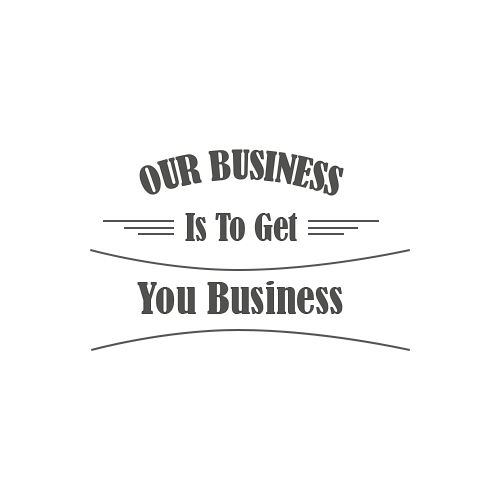
<style>
.page{position:relative;width:500px;height:500px;background:#ffffff}
.page>*{position:absolute;margin:0}
.t1{font:36.5px "BernardMT-Condensed";color:#51514f}
.t2{font:34.5px "BernardMT-Condensed";color:#51514f}
.t3{font:40px "BernardMT-Condensed";color:#51514f;scale:1.06 1}
</style>
<div class="page">
<p class="t1" style="left:139px;top:149px;width:205px;height:47px">OUR BUSINESS</p>
<p class="t2" style="left:185px;top:213px;width:112px;height:28px">Is To Get</p>
<p class="t3" style="left:137px;top:281px;width:206px;height:33px">You Business</p>
</div>
